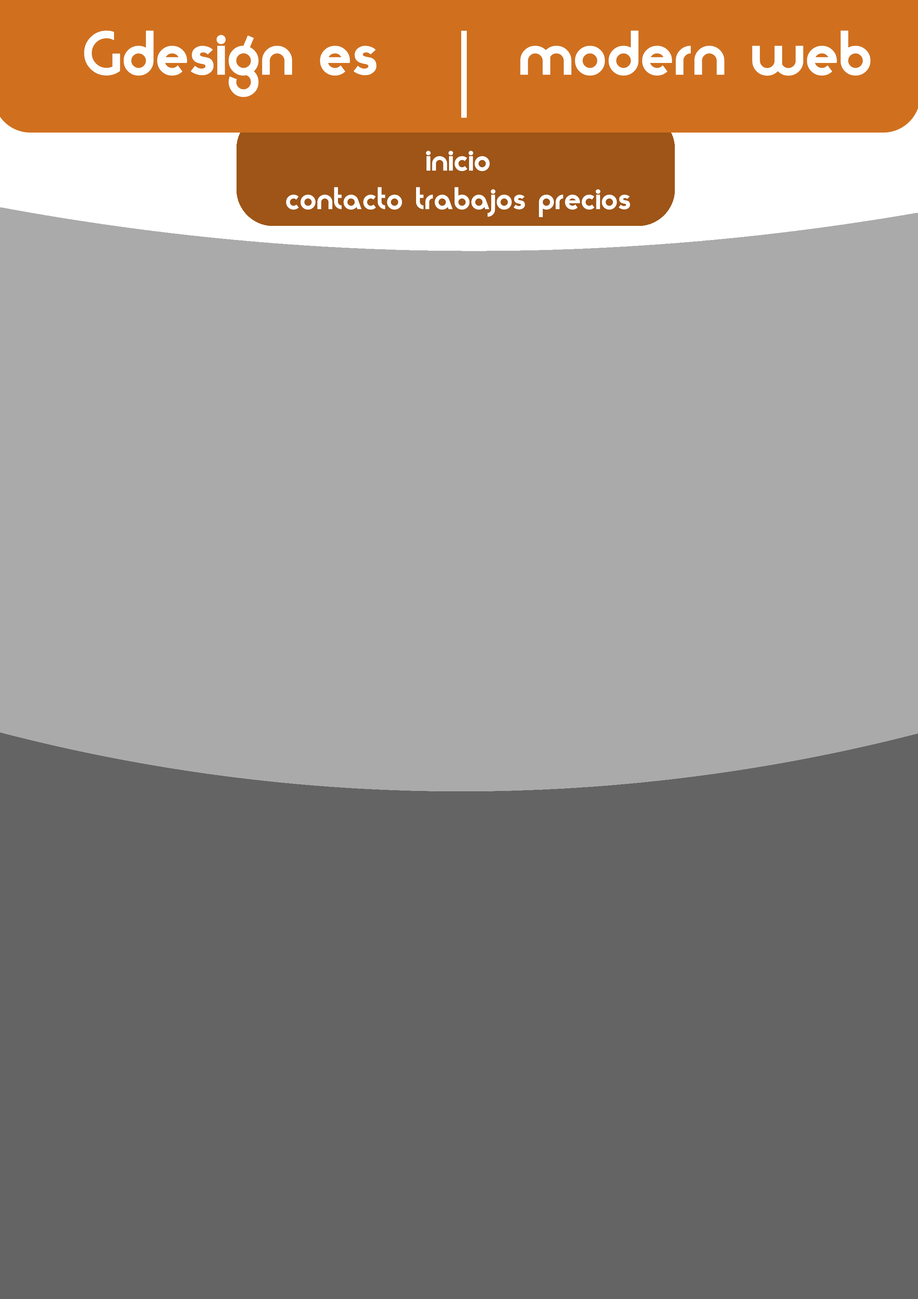
<style>
.page{position:relative;width:918px;height:1299px;background:#aaaaaa}
.page>*{position:absolute;margin:0}
.t1{font:55.5px "Moderna";color:#ffffff}
.t2{font:27.8px/38.6px "Moderna";color:#ffffff}
</style>
<div class="page">
<p class="t1" style="left:84px;top:30px;width:293px;height:67px">Gdesign es</p>
<p class="t1" style="left:520px;top:30px;width:351px;height:46px">modern web</p>
<p class="t2" style="left:286px;top:151px;width:344px;height:66px;text-align:center">inicio<br>contacto trabajos precios</p>
</div>
